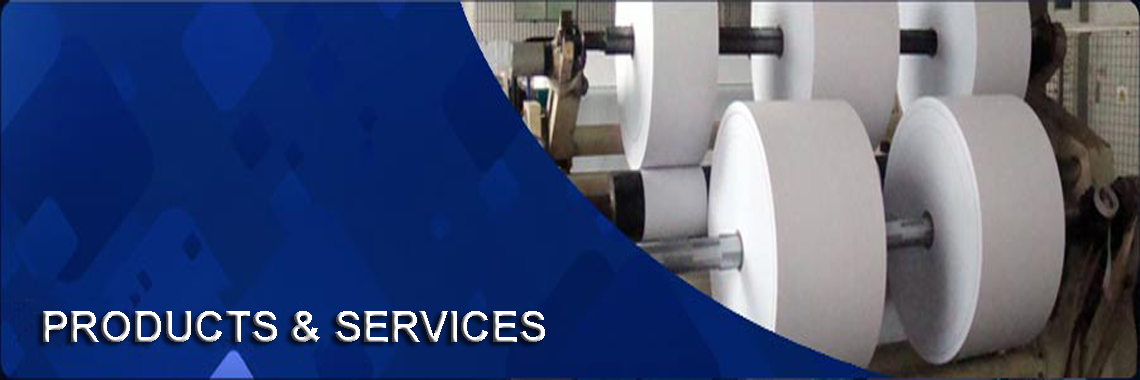
<style>
.page{position:relative;width:1140px;height:380px}
.page>*{position:absolute;margin:0}
.t1{font:42.5px "Arial-BoldMT"}
</style>
<div class="page">
<p class="t1" style="left:43px;top:311px;width:502px;height:31px">PRODUCTS &amp; SERVICES</p>
</div>
